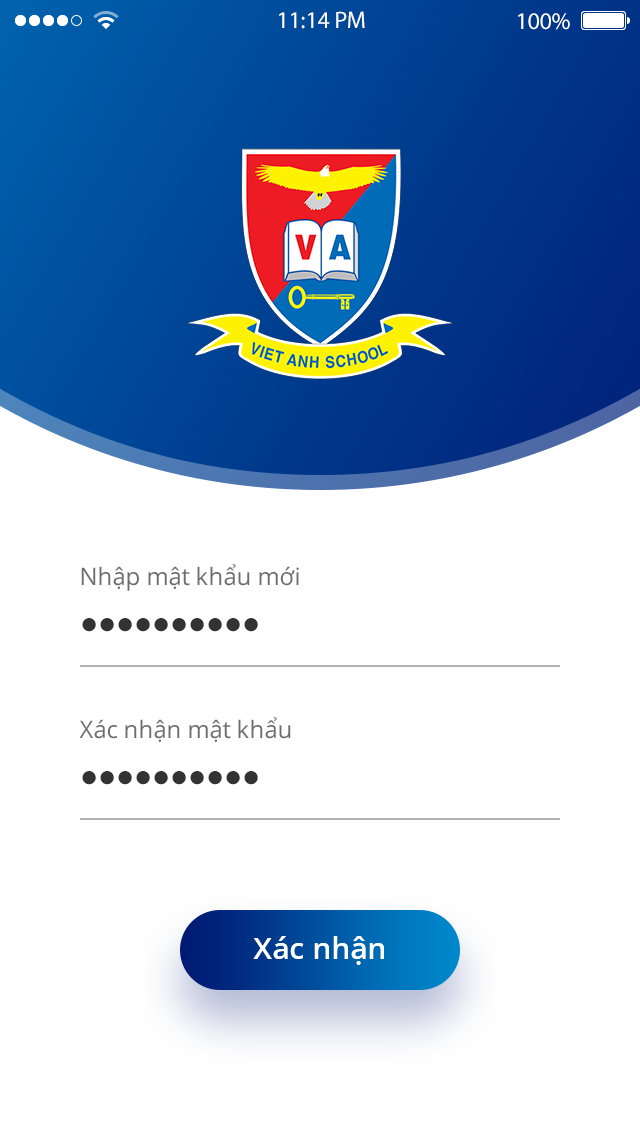
<style>
.page{position:relative;width:640px;height:1136px;background:#ffffff}
.page>*{position:absolute;margin:0}
.t1{font:24px "MyriadPro-Regular";color:#ffffff}
.t2{font:24px "OpenSans-Regular";color:#6e6e6e}
.t3{font:30px "TimesNewRomanPSMT";color:#333333}
.t4{font:30px "OpenSans-SemiBold";color:#fefefe}
</style>
<div class="page">
<p class="t1" style="left:279px;top:11px;width:86px;height:18px">11:14 PM</p>
<p class="t1" style="left:518px;top:13px;width:52px;height:17px">100%</p>
<p class="t2" style="left:81px;top:564px;width:218px;height:27px">Nhập mật khẩu mới</p>
<p class="t3" style="left:82px;top:618px;width:176px;height:14px">●●●●●●●●●●</p>
<p class="t2" style="left:79px;top:717px;width:212px;height:25px">Xác nhận mật khẩu</p>
<p class="t3" style="left:82px;top:771px;width:176px;height:14px">●●●●●●●●●●</p>
<p class="t4" style="left:253px;top:936px;width:131px;height:29px">Xác nhận</p>
</div>
